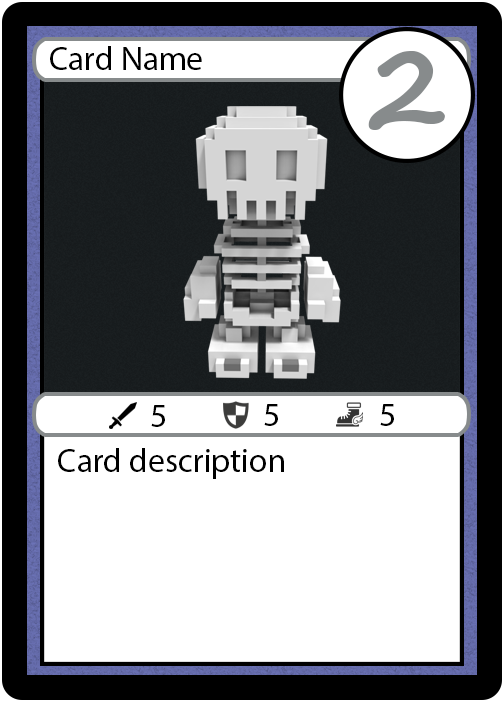
<style>
.page{position:relative;width:504px;height:702px;background:#ffffff}
.page>*{position:absolute;margin:0}
.t1{font:33.3px "MyriadPro-Regular";color:#000000}
.t2{font:111px "SegoeScript-Bold";color:#878b8c}
</style>
<div class="page">
<p class="t1" style="left:50px;top:46px;width:152px;height:24px">Card Name</p>
<p class="t2" style="left:368px;top:51px;width:77px;height:79px">2</p>
<p class="t1" style="left:151px;top:405px;width:14px;height:22px">5</p>
<p class="t1" style="left:264px;top:404px;width:14px;height:22px">5</p>
<p class="t1" style="left:380px;top:404px;width:14px;height:22px">5</p>
<p class="t1" style="left:58px;top:448px;width:226px;height:31px">Card description</p>
</div>
